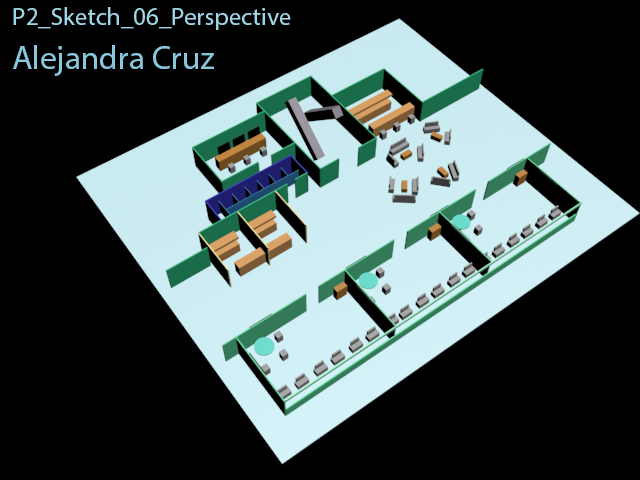
<style>
.page{position:relative;width:640px;height:480px;background:#000000}
.page>*{position:absolute;margin:0}
.t1{font:25px "MyriadPro-Regular";color:#9ed6e8}
.t2{font:33.3px "MyriadPro-Regular";color:#89c8dc}
</style>
<div class="page">
<p class="t1" style="left:13px;top:7px;width:278px;height:23px">P2_Sketch_06_Perspective</p>
<p class="t2" style="left:13px;top:45px;width:201px;height:31px">Alejandra Cruz</p>
</div>
